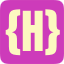
<style>
.page{position:relative;width:64px;height:64px;background:#cd3bba}
.page>*{position:absolute;margin:0}
.t1{font:47px "Anton-Regular";color:#fcf8c0}
</style>
<div class="page">
<p class="t1" style="left:5px;top:9px;width:55px;height:47px">{H}</p>
</div>
